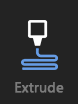
<style>
.page{position:relative;width:78px;height:104px;background:#232323}
.page>*{position:absolute;margin:0}
.t1{font:14px "SegoeUI";color:#7c7c7c;font-weight:bold}
</style>
<div class="page">
<p class="t1" style="left:15px;top:82px;width:49px;height:11px">Extrude</p>
</div>
